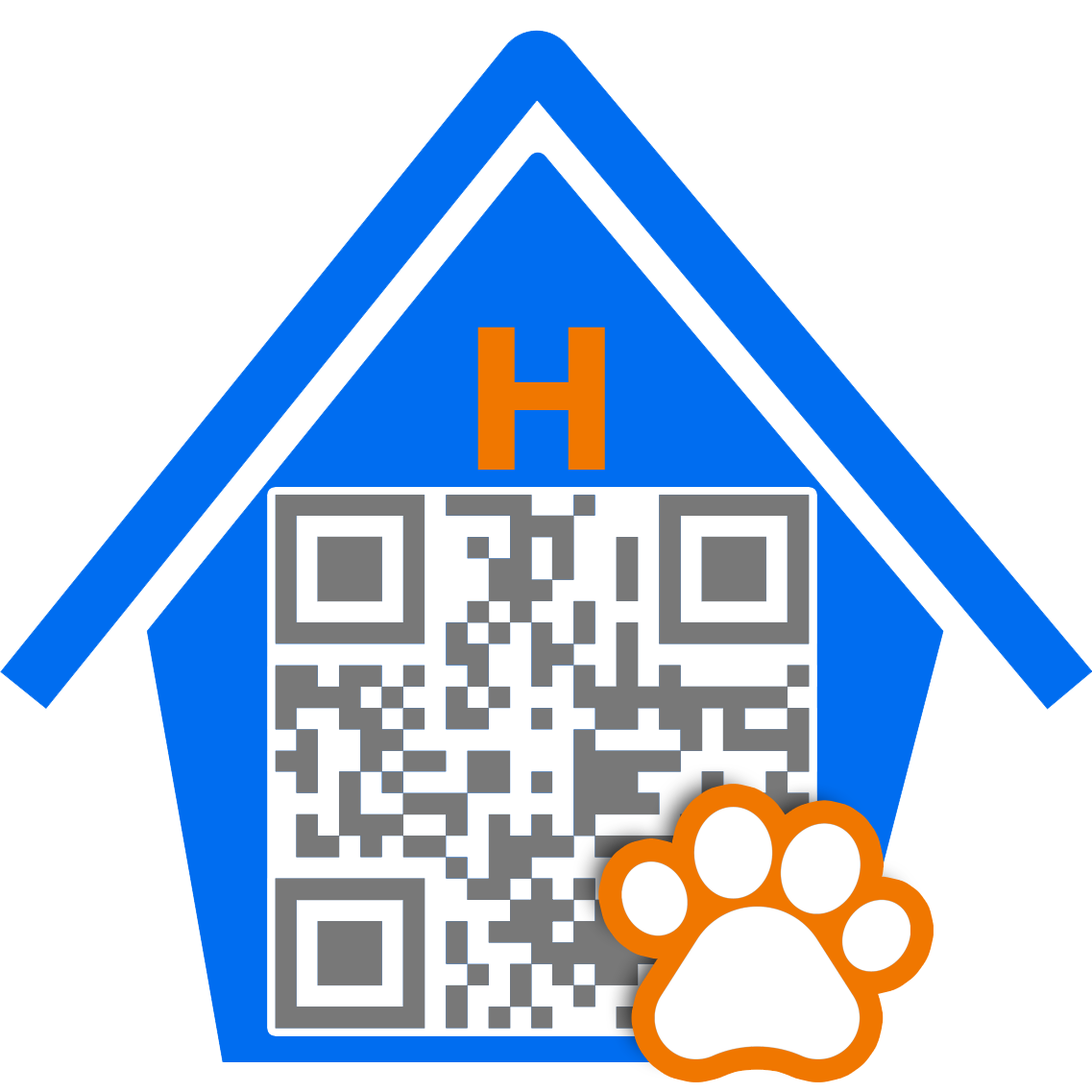
<style>
.page{position:relative;width:1092px;height:1092px;background:#ffffff}
.page>*{position:absolute;margin:0}
.t1{font:213.4px "Aharoni-Bold";color:#f07700}
</style>
<div class="page">
<p class="t1" style="left:477px;top:327px;width:128px;height:143px">H</p>
</div>
